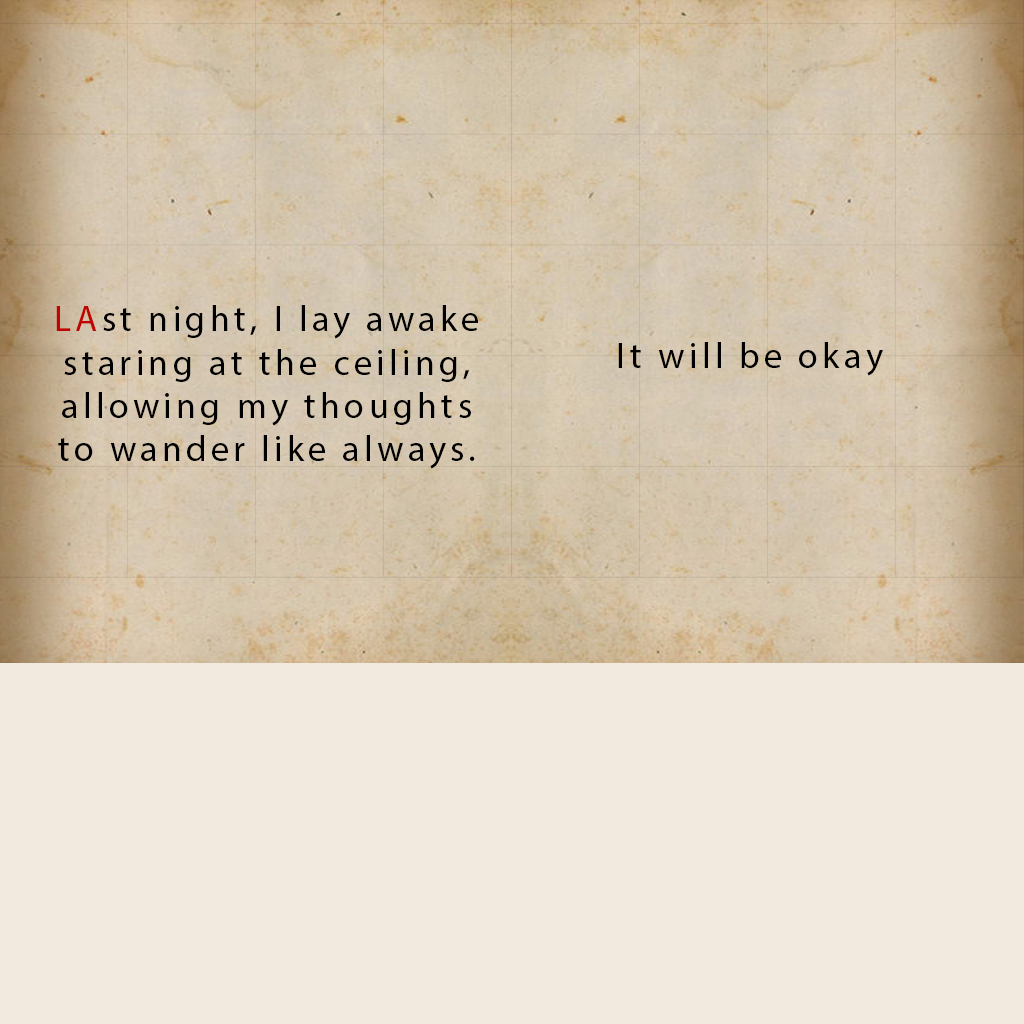
<style>
.page{position:relative;width:1024px;height:1024px;background:#f2eade}
.page>*{position:absolute;margin:0}
.t1{font:36px "MyriadPro-Regular";letter-spacing:0.12em;color:#000000}
.t2{font:36px "MyriadPro-Regular";letter-spacing:0.12em;color:#c00404}
</style>
<div class="page">
<p class="t1" style="left:56px;top:305px;width:422px;height:164px;text-align:center"><span class="t2">LA</span>st night, I lay awake <br>staring at the ceiling, <br>allowing my thoughts <br>to wander like always.</p>
<p class="t1" style="left:618px;top:342px;width:265px;height:34px">It will be okay</p>
</div>
